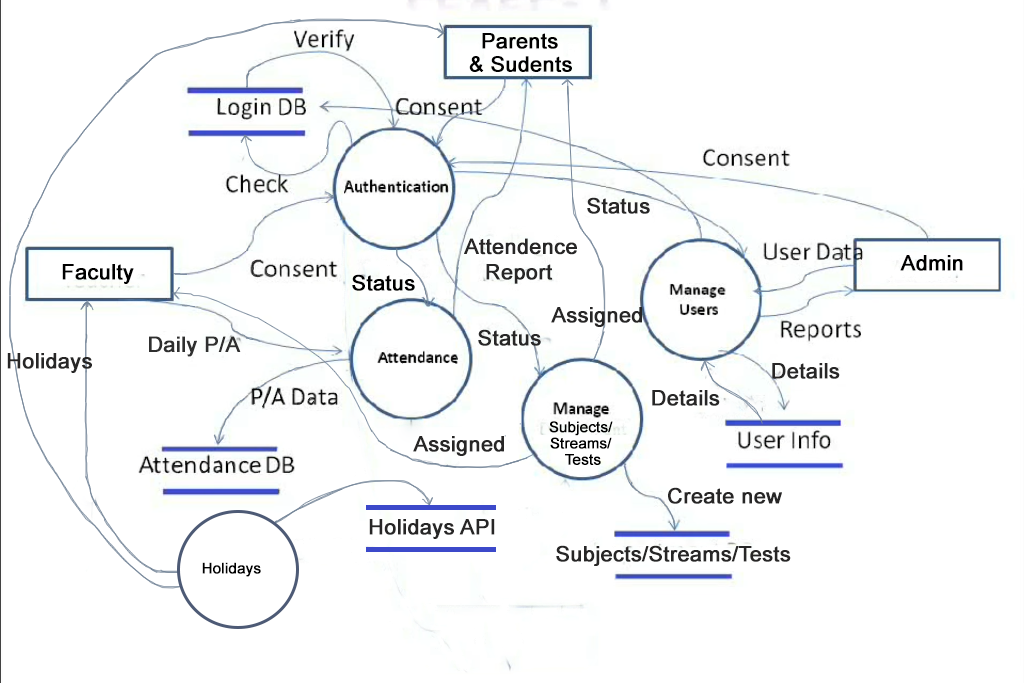
<style>
.page{position:relative;width:1024px;height:683px;background:#ffffff}
.page>*{position:absolute;margin:0}
.t1{font:21.3px "ArialMT";color:#000000;font-weight:bold}
.t2{font:21.3px "ArialMT";color:#272626;font-weight:bold}
.t3{font:21.3px "ArialMT";color:#2f2f2f;font-weight:bold}
.t4{font:14.7px "ArialMT";color:#000000;font-weight:bold}
</style>
<div class="page">
<p class="t1" style="left:482px;top:33px;width:76px;height:16px">Parents</p>
<p class="t1" style="left:469px;top:56px;width:103px;height:16px">&amp; Sudents</p>
<p class="t2" style="left:587px;top:197px;width:63px;height:17px">Status</p>
<p class="t2" style="left:464px;top:238px;width:113px;height:17px">Attendence</p>
<p class="t1" style="left:900px;top:255px;width:63px;height:16px">Admin</p>
<p class="t1" style="left:62px;top:264px;width:72px;height:20px">Faculty</p>
<p class="t2" style="left:486px;top:264px;width:67px;height:20px">Report</p>
<p class="t1" style="left:352px;top:274px;width:63px;height:17px">Status</p>
<p class="t2" style="left:551px;top:307px;width:91px;height:20px">Assigned</p>
<p class="t2" style="left:478px;top:329px;width:63px;height:17px">Status</p>
<p class="t3" style="left:149px;top:336px;width:92px;height:21px">Daily P/A</p>
<p class="t2" style="left:7px;top:353px;width:85px;height:20px">Holidays</p>
<p class="t2" style="left:772px;top:363px;width:68px;height:16px">Details</p>
<p class="t2" style="left:652px;top:390px;width:68px;height:16px">Details</p>
<p class="t4" style="left:549px;top:421px;width:64px;height:15px">Subjects/</p>
<p class="t2" style="left:413px;top:436px;width:91px;height:20px">Assigned</p>
<p class="t4" style="left:550px;top:437px;width:62px;height:12px">Streams/</p>
<p class="t4" style="left:565px;top:454px;width:36px;height:11px">Tests</p>
<p class="t2" style="left:668px;top:487px;width:114px;height:17px">Create new</p>
<p class="t2" style="left:369px;top:519px;width:126px;height:20px">Holidays API</p>
<p class="t2" style="left:556px;top:545px;width:235px;height:21px">Subjects/Streams/Tests</p>
<p class="t4" style="left:202px;top:562px;width:59px;height:15px">Holidays</p>
</div>
